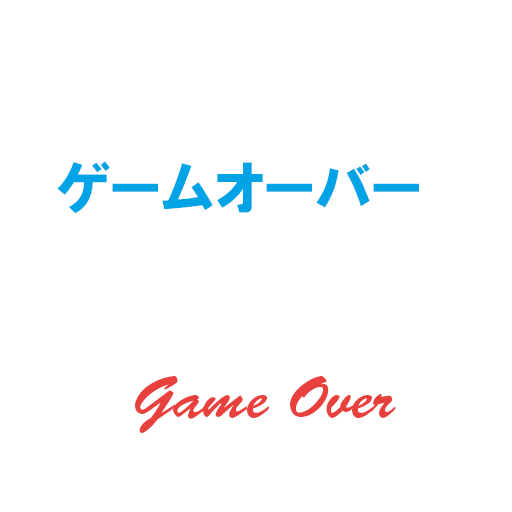
<style>
.page{position:relative;width:512px;height:512px;background:#ffffff}
.page>*{position:absolute;margin:0}
.t1{font:60px "HGPSoeiKakugothicUB";color:#00a4e6}
.t2{font:60px "BrushScriptStd";color:#e8403c}
.t3{font:60px "KozGoPr6N-Regular";color:#00a4e6}
</style>
<div class="page">
<p class="t1" style="left:57px;top:161px;width:362px;height:53px">ゲームオーバー</p>
<p class="t2" style="left:135px;top:376px;width:261px;height:57px"><span class="t3"><br></span>Game Over</p>
</div>
